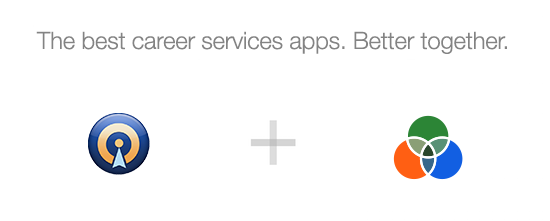
<style>
.page{position:relative;width:550px;height:221px;background:#ffffff}
.page>*{position:absolute;margin:0}
.t1{font:24px "HelveticaNeue-Light";letter-spacing:-0.01em;color:#838383}
</style>
<div class="page">
<p class="t1" style="left:36px;top:31px;width:471px;height:23px">The best career services apps. Better together.</p>
</div>
